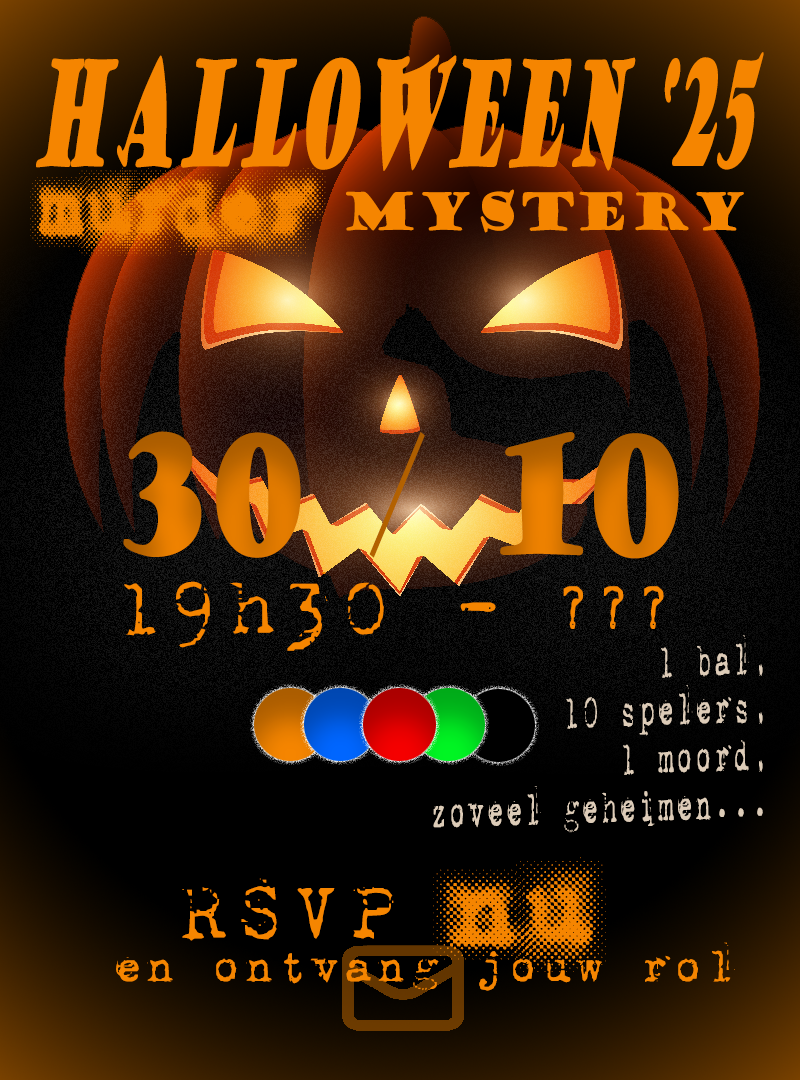
<style>
.page{position:relative;width:800px;height:1080px;background:#000000}
.page>*{position:absolute;margin:0}
.t1{font:145.6px "GoudyStout";color:#f58500;scale:0.35 1}
.t2{font:50.7px "GoudyStout";color:#f58500;scale:0.88 1}
.t3{font:120.7px "PUNKBABE";color:#f58500;scale:0.88 1}
.t4{font:160.7px "GoudyStout";scale:0.71 1}
.t5{font:86.7px "1942report";color:#f58500}
.t6{font:72.7px "1942report";color:#f58500}
.t7{font:50.7px/48px "1942report";color:#ddccb8;scale:0.57 1}
.t8{font:87.7px "1942report";color:#f58500}
.t9{font:156.7px "PUNKBABE";color:#f58500}
.t10{font:50.7px "1942report";color:#f58500}
</style>
<div class="page">
<p class="t1" style="left:36px;top:52px;width:728px;height:119px">Halloween ‘25</p>
<p class="t2" style="left:30px;top:167px;width:714px;height:90px"><span class="t3">Murder </span>mystery</p>
<p class="t4" style="left:123px;top:431px;width:556px;height:128px">30 / 10</p>
<p class="t5" style="left:124px;top:572px;width:540px;height:79px">19h30 -<span class="t6"> ???</span></p>
<p class="t7" style="left:433px;top:635px;width:330px;height:198px;text-align:right;rotate:-2deg">1 bal,<br>10 spelers,<br>1 moord,<br> zoveel geheimen...</p>
<p class="t8" style="left:182px;top:857px;width:424px;height:115px">RSVP <span class="t9">NU</span></p>
<p class="t10" style="left:116px;top:942px;width:619px;height:49px">en ontvang jouw rol</p>
</div>
